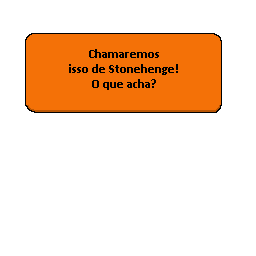
<style>
.page{position:relative;width:256px;height:256px;background:#ffffff}
.page>*{position:absolute;margin:0}
.t1{font:12.5px "Calibri-Bold";color:#000000}
</style>
<div class="page">
<p class="t1" style="left:69px;top:49px;width:109px;height:41px;text-align:center">Chamaremos<br>isso de Stonehenge!<br>O que acha?</p>
</div>
